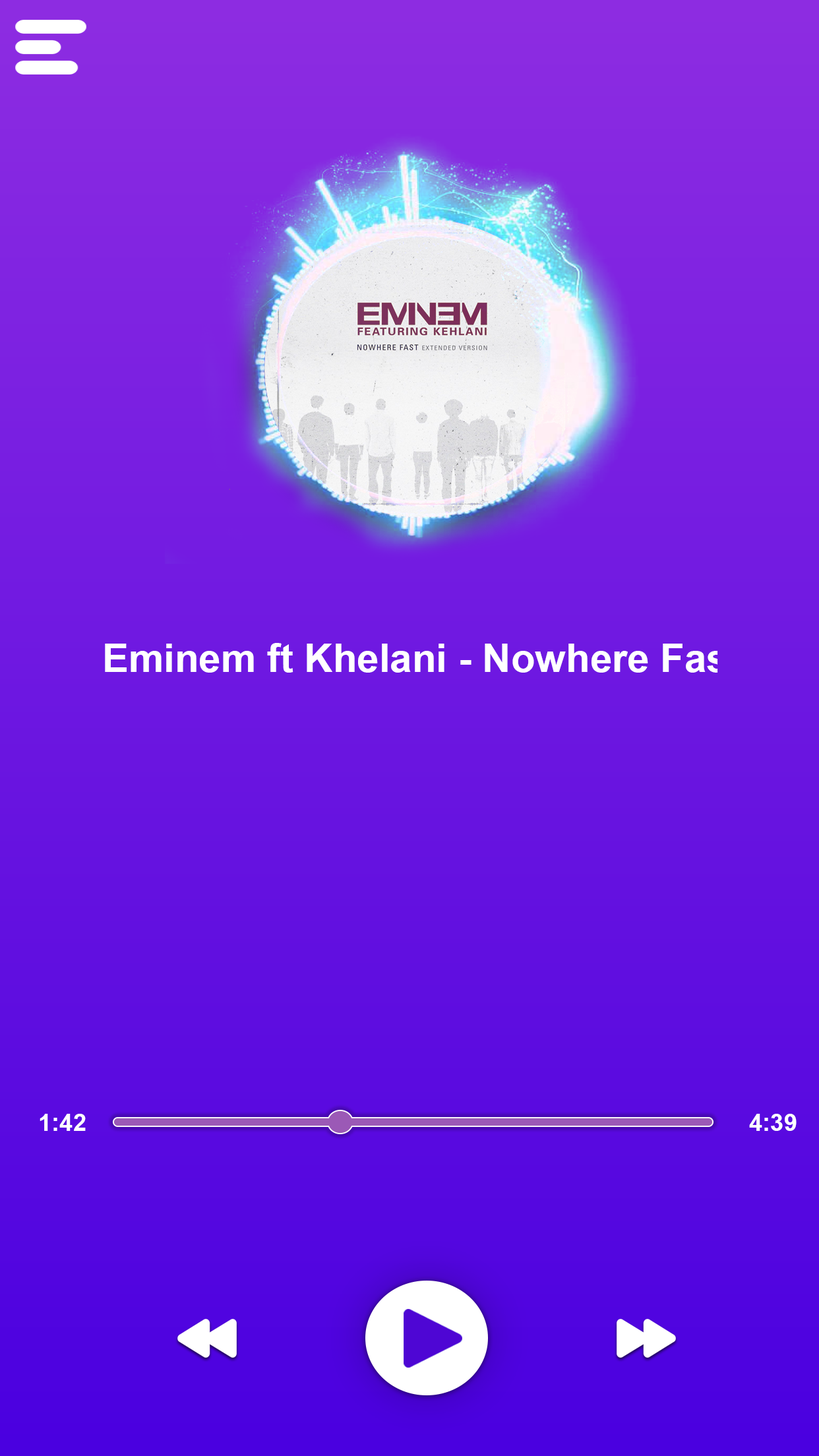
<style>
.page{position:relative;width:819px;height:1456px}
.page>*{position:absolute;margin:0}
.t1{font:39.6px "Arial-BoldMT";color:#ffffff}
.t2{font:23.7px "Arial-BoldMT";color:#ffffff}
</style>
<div class="page">
<p class="t1" style="left:105px;top:643px;width:637px;height:30px">Eminem ft Khelani - Nowhere Fast</p>
<p class="t2" style="left:40px;top:1114px;width:46px;height:17px">1:42</p>
<p class="t2" style="left:749px;top:1114px;width:48px;height:17px">4:39</p>
</div>
